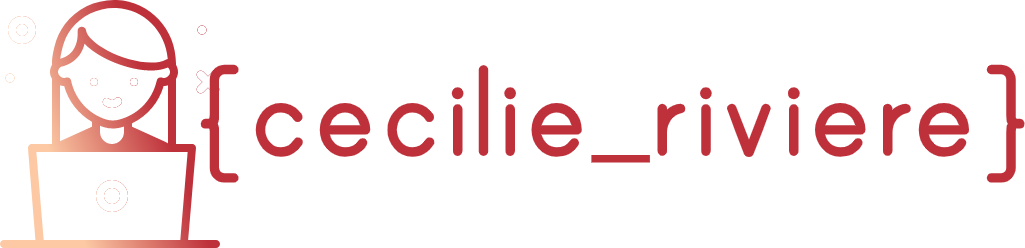
<style>
.page{position:relative;width:1025px;height:248px;background:#ffffff}
.page>*{position:absolute;margin:0}
.t1{font:150px "PrintBold";color:#be313b}
</style>
<div class="page">
<p class="t1" style="left:200px;top:64px;width:825px;height:119px">{cecilie_riviere}</p>
</div>
